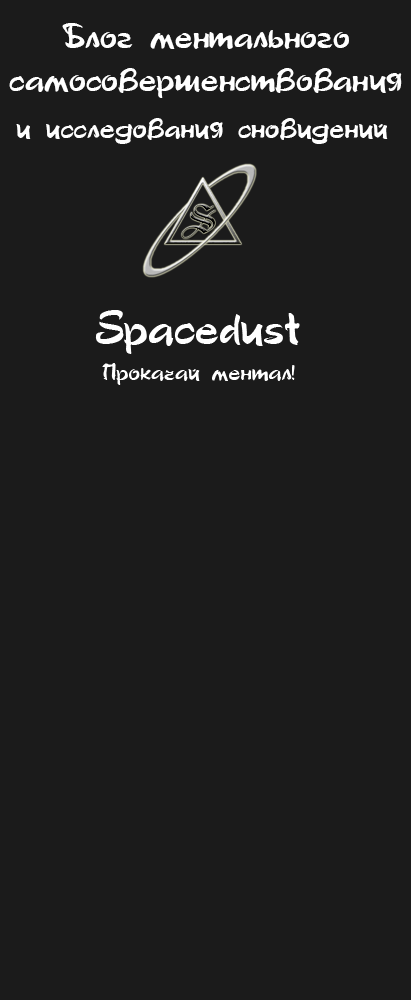
<style>
.page{position:relative;width:411px;height:1000px;background:#1b1b1b}
.page>*{position:absolute;margin:0}
.t1{font:35.3px "Stylo-Bold";color:#ffffff}
.t2{font:30px "Stylo-Bold";color:#ffffff}
.t3{font:48px "Stylo-Bold";color:#ffffff}
.t4{font:24px "Stylo-Bold";color:#ffffff}
</style>
<div class="page">
<p class="t1" style="left:9px;top:23px;width:393px;height:75px;text-align:center">Блог ментального <br>самосовершенствования</p>
<p class="t2" style="left:16px;top:118px;width:372px;height:26px">и исследования сновидений</p>
<p class="t3" style="left:95px;top:310px;width:205px;height:44px">Spacedust</p>
<p class="t4" style="left:102px;top:363px;width:193px;height:22px">Прокачай ментал!</p>
</div>
